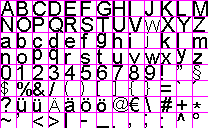
<style>
.page{position:relative;width:208px;height:128px;background:#ffffff}
.page>*{position:absolute;margin:0}
.t1{font:21.3px "ArialMT";color:#000000}
.t2{font:16px "ArialMT";color:#000000}
.t3{font:17.3px "ArialMT";color:#000000}
.t4{font:18.7px "ArialMT";color:#000000}
.t5{font:12px "ArialMT";color:#000000}
.t6{font:20px "ArialMT";color:#000000}
</style>
<div class="page">
<p class="t1" style="left:1px;top:1px;width:13px;height:15px">A</p>
<p class="t1" style="left:17px;top:1px;width:11px;height:15px">B</p>
<p class="t1" style="left:33px;top:1px;width:13px;height:15px">C</p>
<p class="t1" style="left:49px;top:1px;width:12px;height:15px">D</p>
<p class="t1" style="left:65px;top:1px;width:11px;height:15px">E</p>
<p class="t1" style="left:81px;top:1px;width:10px;height:15px">F</p>
<p class="t1" style="left:97px;top:1px;width:14px;height:15px">G</p>
<p class="t1" style="left:113px;top:1px;width:12px;height:15px">H</p>
<p class="t1" style="left:145px;top:1px;width:8px;height:15px">J</p>
<p class="t1" style="left:161px;top:1px;width:12px;height:15px">K</p>
<p class="t1" style="left:177px;top:1px;width:9px;height:15px">L</p>
<p class="t1" style="left:193px;top:1px;width:15px;height:15px">M</p>
<p class="t1" style="left:1px;top:17px;width:12px;height:15px">N</p>
<p class="t1" style="left:17px;top:17px;width:14px;height:15px">O</p>
<p class="t1" style="left:33px;top:17px;width:11px;height:15px">P</p>
<p class="t1" style="left:49px;top:17px;width:14px;height:16px">Q</p>
<p class="t1" style="left:65px;top:17px;width:12px;height:15px">R</p>
<p class="t1" style="left:81px;top:17px;width:12px;height:15px">S</p>
<p class="t1" style="left:97px;top:17px;width:12px;height:15px">T</p>
<p class="t1" style="left:113px;top:17px;width:12px;height:15px">U</p>
<p class="t1" style="left:129px;top:17px;width:13px;height:15px">V</p>
<p class="t1" style="left:161px;top:17px;width:14px;height:15px">X</p>
<p class="t1" style="left:177px;top:17px;width:14px;height:15px">Y</p>
<p class="t1" style="left:193px;top:17px;width:12px;height:15px">Z</p>
<p class="t2" style="left:145px;top:20px;width:15px;height:12px">W</p>
<p class="t1" style="left:1px;top:37px;width:10px;height:11px">a</p>
<p class="t1" style="left:17px;top:33px;width:9px;height:15px">b</p>
<p class="t1" style="left:33px;top:37px;width:9px;height:11px">c</p>
<p class="t1" style="left:49px;top:33px;width:9px;height:15px">d</p>
<p class="t1" style="left:65px;top:37px;width:10px;height:11px">e</p>
<p class="t1" style="left:81px;top:33px;width:7px;height:15px">f</p>
<p class="t1" style="left:97px;top:33px;width:9px;height:15px">g</p>
<p class="t1" style="left:113px;top:33px;width:9px;height:15px">h</p>
<p class="t1" style="left:129px;top:33px;width:2px;height:15px">i</p>
<p class="t2" style="left:145px;top:33px;width:3px;height:15px">j</p>
<p class="t1" style="left:161px;top:33px;width:9px;height:15px">k</p>
<p class="t1" style="left:193px;top:37px;width:14px;height:11px">m</p>
<p class="t1" style="left:1px;top:53px;width:9px;height:11px">n</p>
<p class="t1" style="left:17px;top:53px;width:10px;height:11px">o</p>
<p class="t1" style="left:33px;top:49px;width:9px;height:15px">p</p>
<p class="t1" style="left:49px;top:49px;width:9px;height:15px">q</p>
<p class="t1" style="left:65px;top:53px;width:6px;height:11px">r</p>
<p class="t1" style="left:81px;top:53px;width:9px;height:11px">s</p>
<p class="t1" style="left:97px;top:49px;width:5px;height:15px">t</p>
<p class="t1" style="left:113px;top:53px;width:9px;height:11px">u</p>
<p class="t1" style="left:129px;top:53px;width:11px;height:11px">v</p>
<p class="t1" style="left:145px;top:53px;width:15px;height:11px">w</p>
<p class="t1" style="left:161px;top:53px;width:10px;height:11px">x</p>
<p class="t1" style="left:177px;top:49px;width:9px;height:15px">y</p>
<p class="t1" style="left:193px;top:53px;width:9px;height:11px">z</p>
<p class="t1" style="left:1px;top:65px;width:10px;height:15px">0</p>
<p class="t1" style="left:17px;top:65px;width:6px;height:15px">1</p>
<p class="t1" style="left:33px;top:65px;width:10px;height:15px">2</p>
<p class="t1" style="left:49px;top:65px;width:10px;height:15px">3</p>
<p class="t1" style="left:65px;top:65px;width:10px;height:15px">4</p>
<p class="t1" style="left:81px;top:65px;width:10px;height:15px">5</p>
<p class="t1" style="left:97px;top:65px;width:10px;height:15px">6</p>
<p class="t1" style="left:113px;top:65px;width:10px;height:15px">7</p>
<p class="t1" style="left:129px;top:65px;width:10px;height:15px">8</p>
<p class="t1" style="left:145px;top:65px;width:10px;height:15px">9</p>
<p class="t1" style="left:161px;top:65px;width:2px;height:15px">!</p>
<p class="t1" style="left:177px;top:65px;width:5px;height:5px">„</p>
<p class="t2" style="left:193px;top:65px;width:8px;height:15px">§</p>
<p class="t3" style="left:1px;top:81px;width:7px;height:15px">$</p>
<p class="t4" style="left:17px;top:82px;width:15px;height:14px">%</p>
<p class="t4" style="left:33px;top:82px;width:12px;height:14px">&amp;</p>
<p class="t4" style="left:49px;top:82px;width:6px;height:14px">/</p>
<p class="t2" style="left:65px;top:81px;width:3px;height:15px">(</p>
<p class="t5" style="left:81px;top:81px;width:3px;height:15px">)</p>
<p class="t5" style="left:97px;top:81px;width:3px;height:15px">[</p>
<p class="t5" style="left:113px;top:81px;width:3px;height:15px">]</p>
<p class="t5" style="left:129px;top:81px;width:5px;height:15px">{</p>
<p class="t5" style="left:145px;top:81px;width:5px;height:15px">}</p>
<p class="t1" style="left:161px;top:85px;width:10px;height:7px">=</p>
<p class="t1" style="left:177px;top:81px;width:3px;height:3px">`</p>
<p class="t1" style="left:193px;top:81px;width:3px;height:3px">´</p>
<p class="t1" style="left:1px;top:97px;width:10px;height:15px">?</p>
<p class="t1" style="left:17px;top:98px;width:9px;height:14px">ü</p>
<p class="t4" style="left:33px;top:99px;width:8px;height:13px">ü</p>
<p class="t3" style="left:49px;top:98px;width:11px;height:14px">Ä</p>
<p class="t1" style="left:65px;top:98px;width:10px;height:14px">ä</p>
<p class="t1" style="left:81px;top:98px;width:10px;height:14px">ö</p>
<p class="t4" style="left:97px;top:99px;width:9px;height:13px">ö</p>
<p class="t2" style="left:113px;top:97px;width:15px;height:15px">@</p>
<p class="t6" style="left:129px;top:97px;width:10px;height:15px">€</p>
<p class="t6" style="left:145px;top:97px;width:6px;height:15px">\</p>
<p class="t6" style="left:161px;top:97px;width:11px;height:15px">#</p>
<p class="t1" style="left:177px;top:100px;width:10px;height:10px">+</p>
<p class="t1" style="left:193px;top:102px;width:8px;height:6px">*</p>
<p class="t1" style="left:17px;top:113px;width:2px;height:5px">‚</p>
<p class="t1" style="left:177px;top:113px;width:8px;height:8px">^</p>
<p class="t1" style="left:193px;top:113px;width:6px;height:6px">°</p>
<p class="t1" style="left:1px;top:118px;width:10px;height:4px">~</p>
<p class="t1" style="left:33px;top:116px;width:10px;height:11px">&lt;</p>
<p class="t1" style="left:49px;top:116px;width:10px;height:11px">&gt;</p>
<p class="t1" style="left:129px;top:123px;width:2px;height:5px">,</p>
<p class="t1" style="left:145px;top:114px;width:2px;height:14px">;</p>
<p class="t1" style="left:161px;top:117px;width:2px;height:11px">:</p>
</div>
